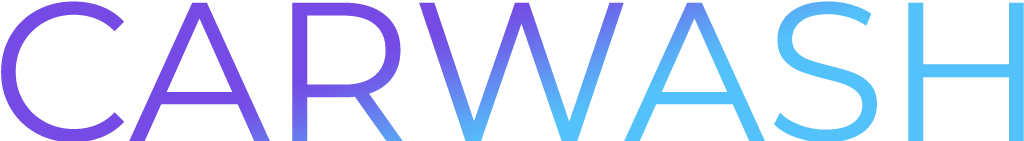
<style>
.page{position:relative;width:1024px;height:141px;background:#ffffff}
.page>*{position:absolute;margin:0}
.t1{font:197.4px "Montserrat-Regular"}
</style>
<div class="page">
<p class="t1" style="left:1px;top:1px;width:1023px;height:142px">CARWASH</p>
</div>
